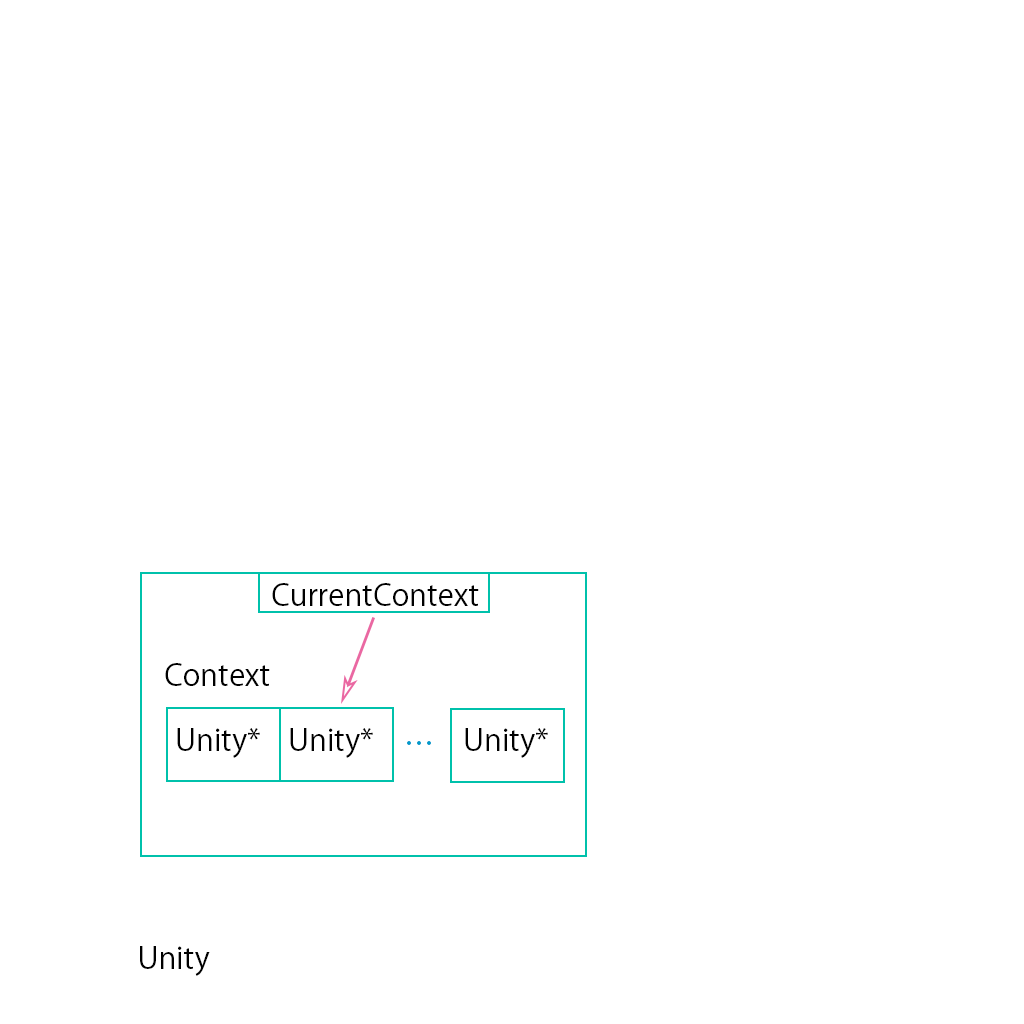
<style>
.page{position:relative;width:1024px;height:1024px;background:#ffffff}
.page>*{position:absolute;margin:0}
.t1{font:30px "KozGoPr6N-Regular";color:#000000}
.t2{font:30px "KozGoPr6N-Regular";color:#009acc}
</style>
<div class="page">
<p class="t1" style="left:272px;top:583px;width:207px;height:23px">CurrentContext</p>
<p class="t1" style="left:165px;top:663px;width:105px;height:23px">Context</p>
<p class="t1" style="left:177px;top:728px;width:83px;height:30px">Unity*</p>
<p class="t1" style="left:290px;top:728px;width:83px;height:30px">Unity*</p>
<p class="t1" style="left:465px;top:728px;width:83px;height:30px">Unity*</p>
<p class="t2" style="left:407px;top:741px;width:24px;height:4px">…</p>
<p class="t1" style="left:140px;top:946px;width:70px;height:30px">Unity</p>
</div>
